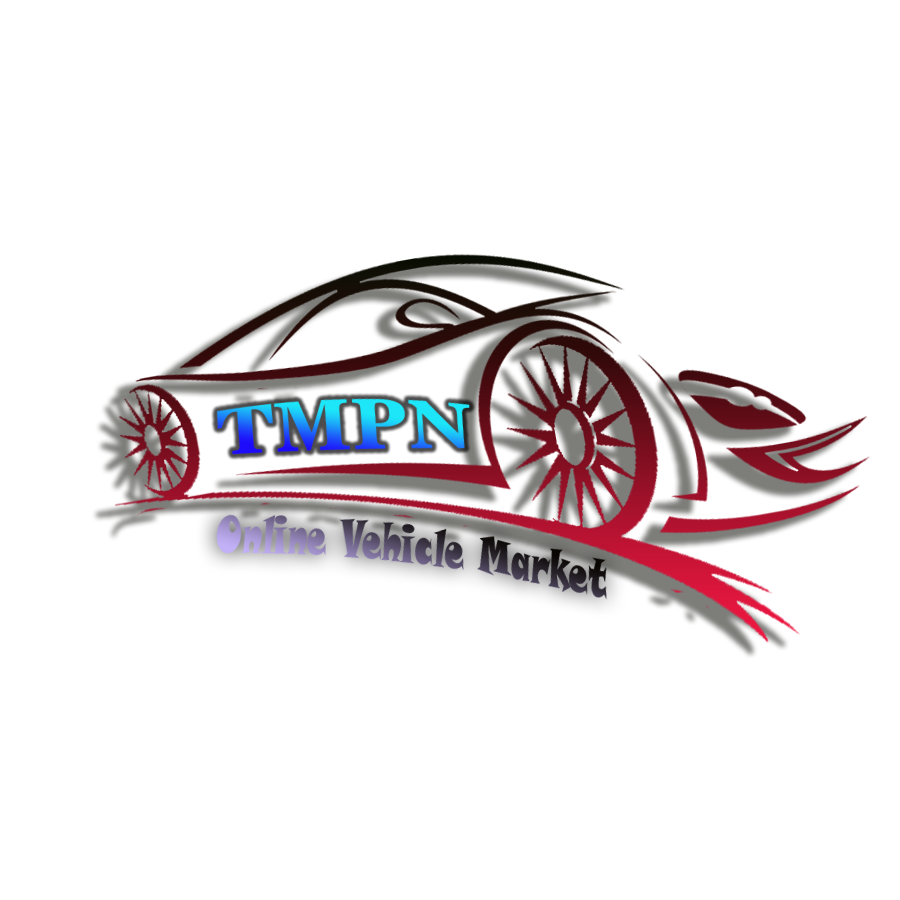
<style>
.page{position:relative;width:900px;height:900px;background:#ffffff}
.page>*{position:absolute;margin:0}
.t1{font:59.4px "News701BT-BoldA";scale:1.28 1}
.t2{font:53.3px "SnapITC-Regular";scale:0.58 1}
</style>
<div class="page">
<p class="t1" style="left:216px;top:398px;width:255px;height:57px;rotate:-2deg">TMPN</p>
<p class="t2" style="left:215px;top:514px;width:393px;height:86px;rotate:7deg">Online Vehicle Market</p>
</div>
